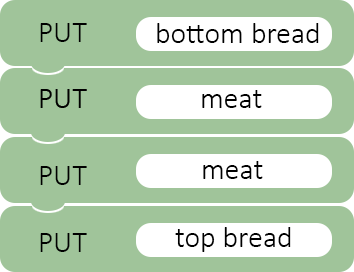
<style>
.page{position:relative;width:354px;height:272px;background:#a0c49a}
.page>*{position:absolute;margin:0}
.t1{font:30px "Calibri-Light";color:#000000}
</style>
<div class="page">
<p class="t1" style="left:40px;top:23px;width:47px;height:19px">PUT</p>
<p class="t1" style="left:157px;top:23px;width:162px;height:20px">bottom bread</p>
<p class="t1" style="left:202px;top:90px;width:60px;height:18px">meat</p>
<p class="t1" style="left:203px;top:161px;width:60px;height:18px">meat</p>
<p class="t1" style="left:40px;top:166px;width:47px;height:19px">PUT</p>
<p class="t1" style="left:40px;top:233px;width:47px;height:19px">PUT</p>
<p class="t1" style="left:175px;top:227px;width:116px;height:25px">top bread</p>
</div>
